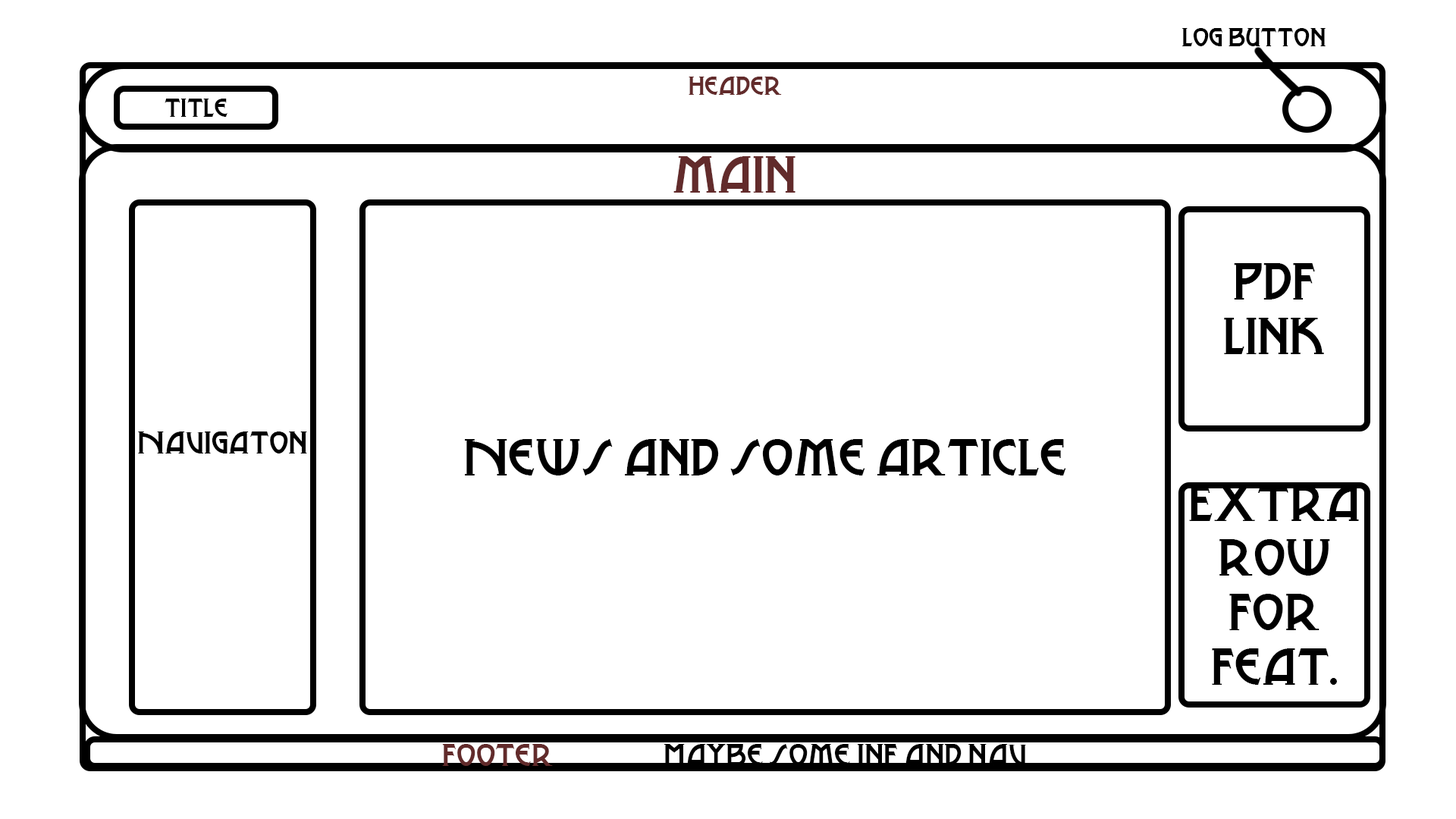
<style>
.page{position:relative;width:1456px;height:819px;background:#ffffff}
.page>*{position:absolute;margin:0}
.t1{font:22.7px "MetroModern";color:#000000}
.t2{font:22.7px "MetroModern";color:#622b2b}
.t3{font:45.5px "MetroModern";color:#622b2b}
.t4{font:45.5px "MetroModern";color:#000000}
.t5{font:27.3px "MetroModern";color:#000000}
.t6{font:27.3px "MetroModern";color:#622b2b}
</style>
<div class="page">
<p class="t1" style="left:1182px;top:28px;width:144px;height:18px">Log Button</p>
<p class="t2" style="left:689px;top:77px;width:93px;height:18px">Header</p>
<p class="t1" style="left:165px;top:99px;width:62px;height:18px">title</p>
<p class="t3" style="left:673px;top:156px;width:122px;height:37px">main</p>
<p class="t4" style="left:1224px;top:263px;width:100px;height:91px;text-align:center">PDF<br>link</p>
<p class="t5" style="left:138px;top:431px;width:169px;height:22px">Navigaton</p>
<p class="t4" style="left:465px;top:439px;width:601px;height:36px"><span class="t5"><br><br><br><br><br><br><br></span>News and some article</p>
<p class="t4" style="left:1189px;top:485px;width:170px;height:200px;text-align:center">Extra<br>row<br>for<br>feat.</p>
<p class="t5" style="left:442px;top:744px;width:584px;height:22px"><span class="t6">Footer                  </span>Maybe some inf and nav</p>
</div>
